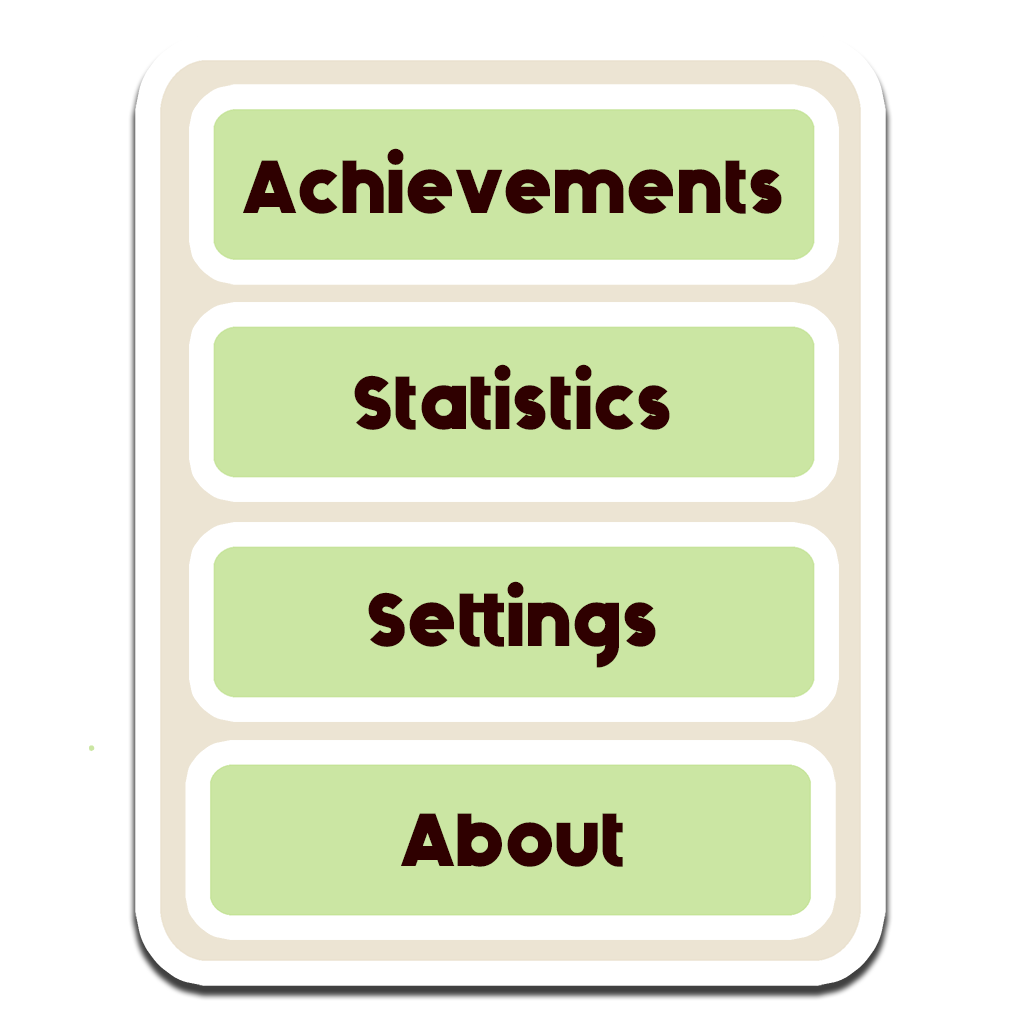
<style>
.page{position:relative;width:1024px;height:1024px;background:#ffffff}
.page>*{position:absolute;margin:0}
.t1{font:75px "Generica-Bold";color:#2f0000}
</style>
<div class="page">
<p class="t1" style="left:243px;top:148px;width:539px;height:66px">Achievements</p>
<p class="t1" style="left:354px;top:364px;width:316px;height:66px">Statistics</p>
<p class="t1" style="left:368px;top:581px;width:288px;height:87px">Settings</p>
<p class="t1" style="left:401px;top:813px;width:222px;height:54px">About</p>
</div>
